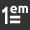
<style>
.page{position:relative;width:30px;height:30px;background:#333333}
.page>*{position:absolute;margin:0}
.t1{font:24.7px "Ubuntu-Bold";color:#ffffff;scale:0.67 1}
.t2{font:13.3px "Ubuntu-Bold";color:#ffffff}
.t3{font:21.6px "Ubuntu-Bold";color:#ffffff}
</style>
<div class="page">
<p class="t1" style="left:2px;top:6px;width:6px;height:18px">1</p>
<p class="t2" style="left:10px;top:5px;width:18px;height:9px">em</p>
<p class="t3" style="left:10px;top:15px;width:11px;height:9px">=</p>
</div>
